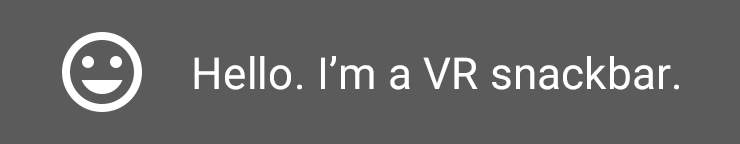
<style>
.page{position:relative;width:740px;height:144px;background:#5b5b5b}
.page>*{position:absolute;margin:0}
.t1{font:44px "Roboto-Regular";letter-spacing:0.005em;color:#ffffff}
</style>
<div class="page">
<p class="t1" style="left:194px;top:56px;width:485px;height:34px">Hello. I’m a VR snackbar.</p>
</div>
